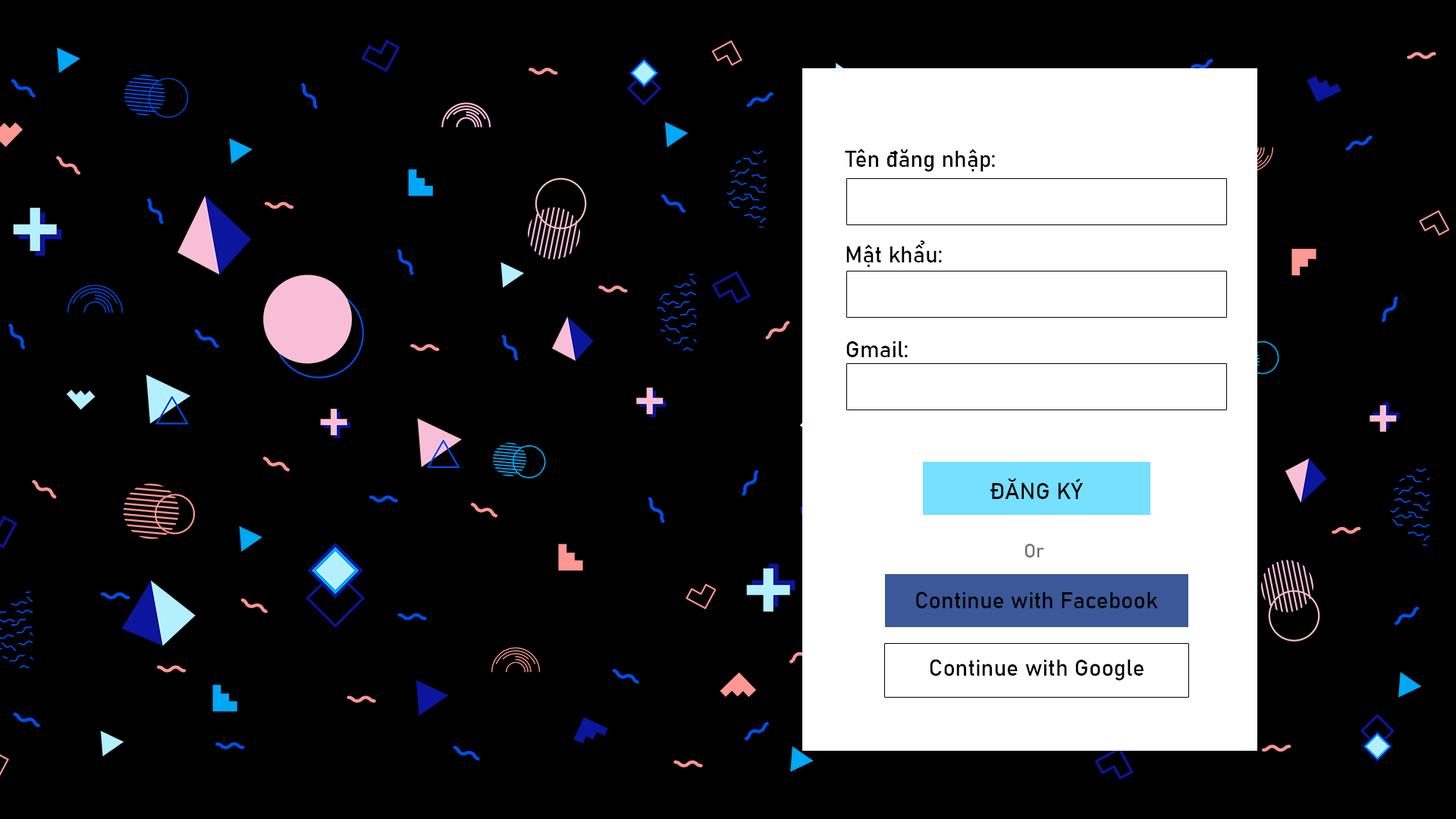
<style>
.page{position:relative;width:1456px;height:819px;background:#000000}
.page>*{position:absolute;margin:0}
.t1{font:22.7px "Bahnschrift";color:#000000}
.t2{font:19px "Bahnschrift";color:#707070}
</style>
<div class="page">
<p class="t1" style="left:845px;top:149px;width:150px;height:23px">Tên đăng nhập:</p>
<p class="t1" style="left:846px;top:240px;width:96px;height:27px">Mật khẩu:</p>
<p class="t1" style="left:846px;top:340px;width:62px;height:17px">Gmail:</p>
<p class="t1" style="left:990px;top:479px;width:93px;height:20px">ĐĂNG KÝ</p>
<p class="t2" style="left:1024px;top:544px;width:20px;height:14px">Or</p>
<p class="t1" style="left:916px;top:591px;width:242px;height:18px">Continue with Facebook</p>
<p class="t1" style="left:930px;top:659px;width:214px;height:22px">Continue with Google</p>
</div>
